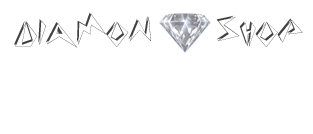
<style>
.page{position:relative;width:313px;height:134px;background:#ffffff}
.page>*{position:absolute;margin:0}
.t1{font:30px "VNBeehive";letter-spacing:-0.04em;color:#413f3f}
</style>
<div class="page">
<p class="t1" style="left:14px;top:12px;width:289px;height:36px">DIAMON    SHOP</p>
</div>
